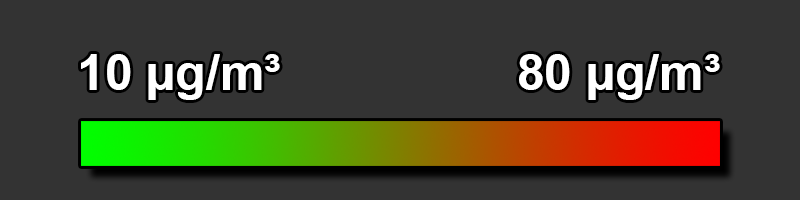
<style>
.page{position:relative;width:800px;height:200px;background:#333333}
.page>*{position:absolute;margin:0}
.t1{font:50px "Arial-BoldMT";color:#ffffff}
</style>
<div class="page">
<p class="t1" style="left:81px;top:54px;width:199px;height:46px">10 µg/m³</p>
<p class="t1" style="left:519px;top:54px;width:201px;height:46px">80 µg/m³</p>
</div>
